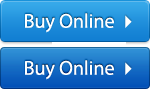
<style>
.page{position:relative;width:150px;height:89px}
.page>*{position:absolute;margin:0}
.t1{font:20px "MyriadPro-Regular";color:#ffffff}
</style>
<div class="page">
<p class="t1" style="left:25px;top:13px;width:89px;height:20px">Buy Online</p>
<p class="t1" style="left:25px;top:60px;width:89px;height:20px">Buy Online</p>
</div>
